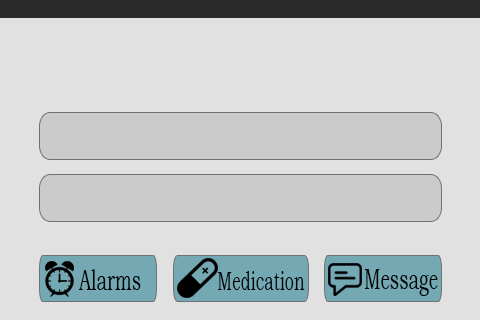
<style>
.page{position:relative;width:480px;height:320px;background:#e1e1e1}
.page>*{position:absolute;margin:0}
.t1{font:29.5px "BookmanOldStyle";color:#000000;scale:0.61 1}
.t2{font:26.9px "BookmanOldStyle";color:#000000;scale:0.61 1}
</style>
<div class="page">
<p class="t1" style="left:78px;top:269px;width:63px;height:21px">Alarms</p>
<p class="t1" style="left:364px;top:269px;width:74px;height:27px">Message</p>
<p class="t2" style="left:218px;top:271px;width:87px;height:19px">Medication</p>
</div>
